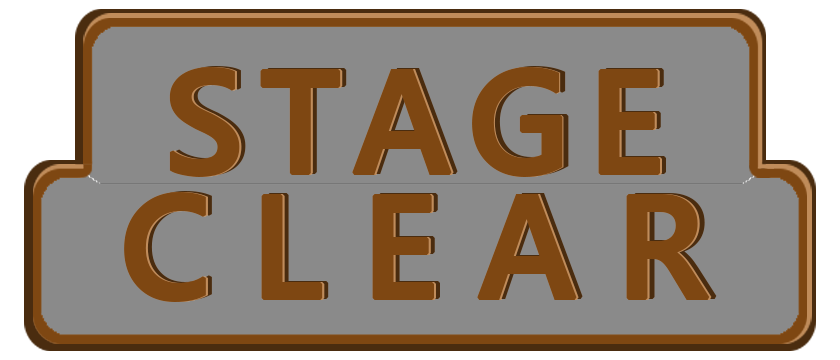
<style>
.page{position:relative;width:840px;height:360px;background:#8a8a8a}
.page>*{position:absolute;margin:0}
.t1{font:145.8px/125px "YuGothicUI-Bold";letter-spacing:0.1em;color:#7e4712;font-weight:bold}
.t2{font:145.8px/125px "YuGothicUI-Bold";letter-spacing:0.25em;color:#7e4712;font-weight:bold}
</style>
<div class="page">
<p class="t1" style="left:124px;top:67px;width:586px;height:235px;text-align:center">STAGE<br><span class="t2">CLEAR</span></p>
<p class="t1" style="left:126px;top:67px;width:586px;height:235px;text-align:center">STAGE<br><span class="t2">CLEAR</span></p>
<p class="t1" style="left:130px;top:66px;width:587px;height:235px;text-align:center">STAGE<br><span class="t2">CLEAR</span></p>
</div>
